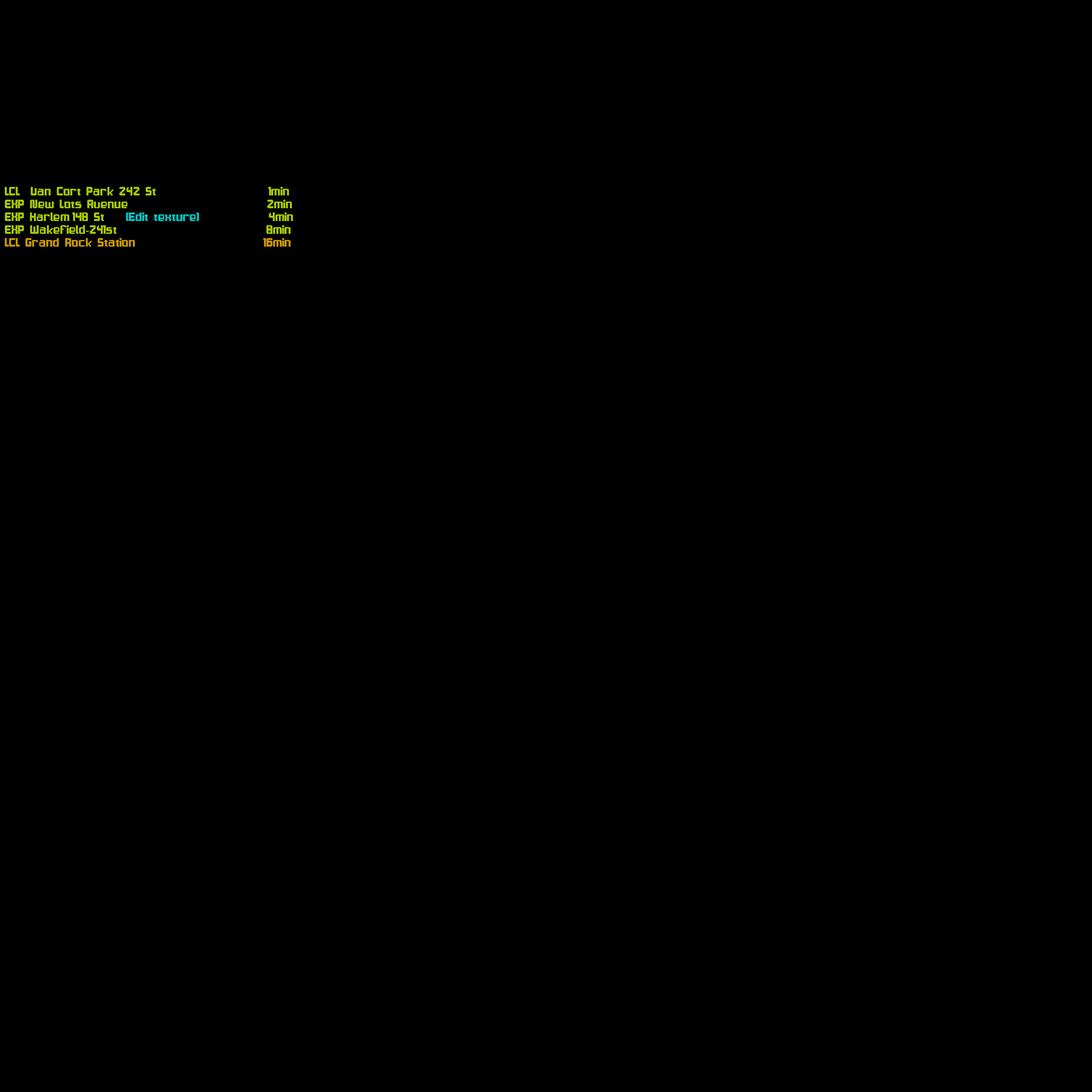
<style>
.page{position:relative;width:1092px;height:1092px;background:#000000}
.page>*{position:absolute;margin:0}
.t1{font:10.7px "SamsTown";color:#d8ff00}
.t2{font:10.7px "SamsTown";color:#00fffc}
.t3{font:10.7px "TimesNewRomanPSMT";color:#d8ff00}
.t4{font:10.7px "SamsTown";color:#ffc000}
</style>
<div class="page">
<p class="t1" style="left:5px;top:187px;width:288px;height:60px">LCL  Van Cort Park 242 St                     1min<br>EXP New Lots Avenue                          2min<br>EXP Harlem 148 St   <span class="t2"> (Edit texture) </span>            4min<br>EXP Wakefield<span class="t3">-</span>241st                            8min<br><span class="t4">LCL Grand Rock Station                        16min</span></p>
</div>
